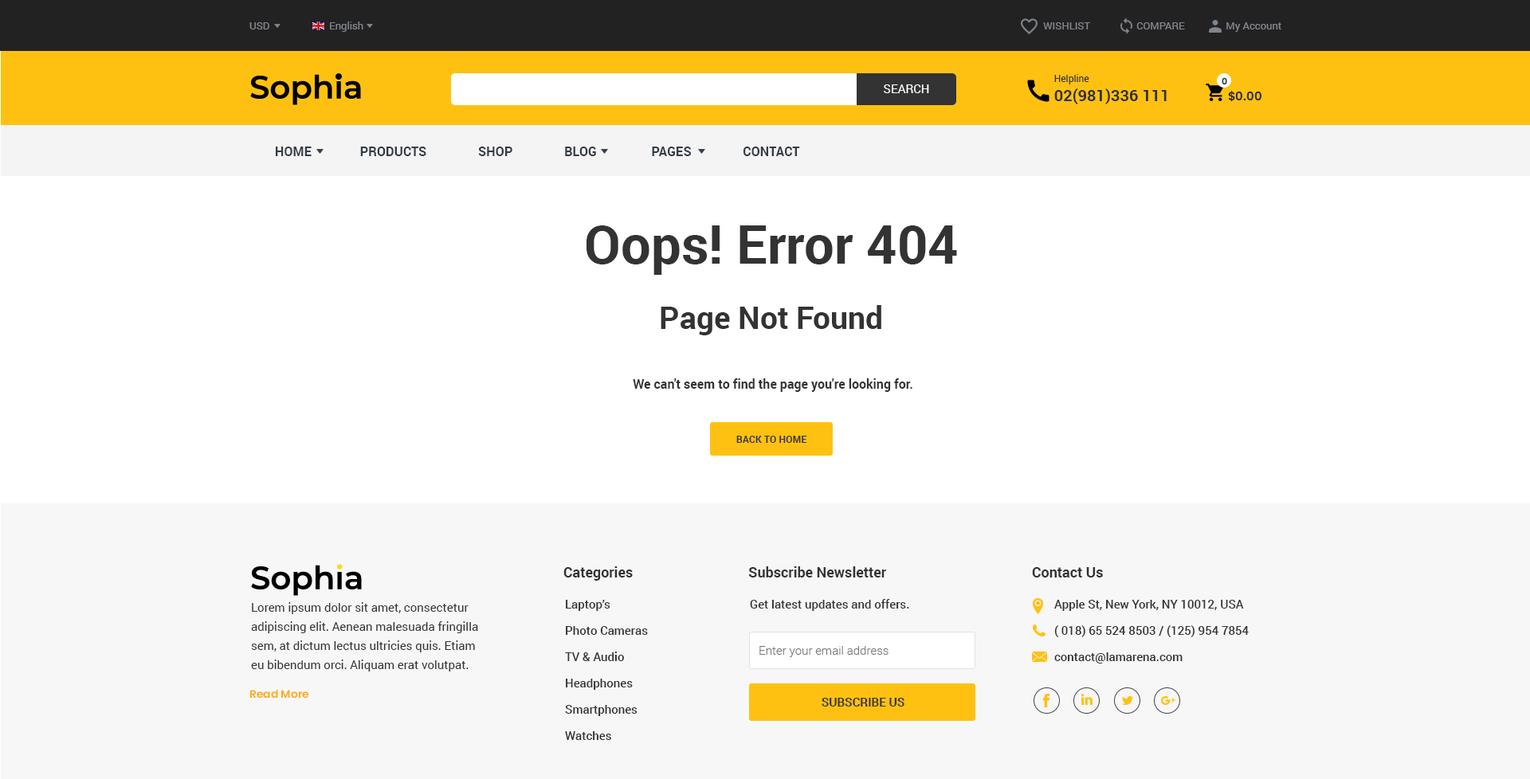
<style>
.page{position:relative;width:1530px;height:779px;background:#ffffff}
.page>*{position:absolute;margin:0}
.t1{font:10.4px "Roboto-Regular";color:#81858c}
.t2{font:15.9px "Roboto-Bold";color:#333333}
.t3{font:9.6px "Roboto-Regular";color:#333333}
.t4{font:8.8px "Poppins-SemiBold";color:#333333}
.t5{font:12px "Roboto-Regular";color:#ffffff}
.t6{font:12px "Poppins-SemiBold";color:#333333}
.t7{font:12.8px "Roboto-Bold";color:#333c48}
.t8{font:12.8px/59.8px "Roboto-Bold";color:#333333}
.t9{font:53.4px/22.3px "Roboto-Bold";color:#333333}
.t10{font:31.1px/65.3px "Roboto-Bold";color:#333333}
.t11{font:9.6px "Roboto-Bold";color:#383838;scale:1.03 1}
.t12{font:14.3px "Roboto-Bold";color:#333333}
.t13{font:12px/19.1px "Roboto-Regular";color:#333333}
.t14{font:12px/26.3px "Roboto-Medium";color:#333333}
.t15{font:12px "Roboto-Medium";color:#333333}
.t16{font:12px "Roboto-Light";color:#777777}
.t17{font:10.8px "Poppins-SemiBold";color:#fbad1a}
.t18{font:12px "Roboto-Bold";color:#383838}
</style>
<div class="page">
<p class="t1" style="left:249px;top:22px;width:20px;height:7px">USD</p>
<p class="t1" style="left:330px;top:22px;width:33px;height:10px">English</p>
<p class="t1" style="left:1043px;top:22px;width:238px;height:10px">WISHLIST                  COMPARE                My Account</p>
<p class="t2" style="left:1054px;top:74px;width:113px;height:30px"><span class="t3">Helpline<br></span>02(981)336 111</p>
<p class="t4" style="left:1222px;top:77px;width:5px;height:8px">0</p>
<p class="t5" style="left:884px;top:84px;width:45px;height:9px">SEARCH</p>
<p class="t6" style="left:1228px;top:91px;width:33px;height:11px">$0.00</p>
<p class="t7" style="left:276px;top:147px;width:524px;height:9px">HOME               PRODUCTS                SHOP                BLOG                 PAGES                CONTACT</p>
<p class="t8" style="left:587px;top:226px;width:370px;height:166px;text-align:center"><span class="t9">Oops! Error 404<br></span><span class="t10">Page Not Found<br></span> We can't seem to find the page you're looking for.</p>
<p class="t11" style="left:736px;top:436px;width:71px;height:7px">BACK TO HOME</p>
<p class="t12" style="left:563px;top:567px;width:70px;height:14px">Categories</p>
<p class="t12" style="left:748px;top:567px;width:138px;height:11px">Subscribe Newsletter</p>
<p class="t12" style="left:1032px;top:567px;width:71px;height:11px">Contact Us</p>
<p class="t13" style="left:251px;top:602px;width:227px;height:70px">Lorem ipsum dolor sit amet, consectetur adipiscing elit. Aenean malesuada fringilla sem, at dictum lectus ultricies quis. Etiam eu bibendum orci. Aliquam erat volutpat.</p>
<p class="t14" style="left:565px;top:600px;width:83px;height:140px">Laptop’s<br>Photo Cameras<br>TV &amp; Audio<br>Headphones<br>Smartphones<br>Watches</p>
<p class="t15" style="left:750px;top:599px;width:159px;height:12px">Get latest updates and offers.</p>
<p class="t14" style="left:1054px;top:600px;width:195px;height:64px">Apple St, New York, NY 10012, USA<br>( 018) 65 524 8503 / (125) 954 7854<br>contact@lamarena.com</p>
<p class="t16" style="left:759px;top:646px;width:130px;height:11px">Enter your email address</p>
<p class="t17" style="left:249px;top:689px;width:60px;height:10px">Read More</p>
<p class="t18" style="left:822px;top:698px;width:82px;height:9px">SUBSCRIBE US</p>
</div>
